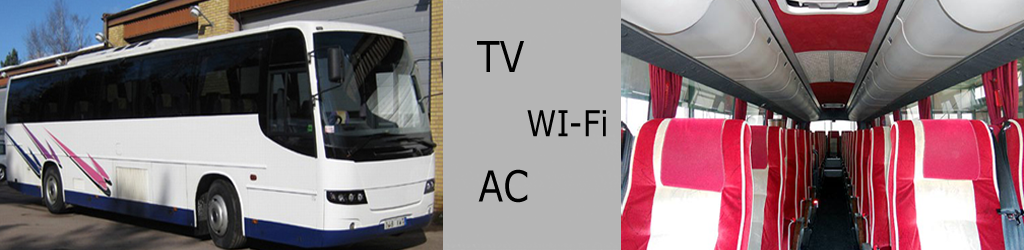
<style>
.page{position:relative;width:1024px;height:250px}
.page>*{position:absolute;margin:0}
.t1{font:42.9px "Verdana";color:#000000;scale:0.85 1}
.t2{font:35.7px "Verdana";color:#000000;scale:0.85 1}
</style>
<div class="page">
<p class="t1" style="left:477px;top:41px;width:47px;height:31px">TV</p>
<p class="t2" style="left:527px;top:110px;width:79px;height:27px">WI-Fi</p>
<p class="t1" style="left:478px;top:169px;width:50px;height:34px">AC</p>
</div>
